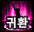
<style>
.page{position:relative;width:34px;height:32px}
.page>*{position:absolute;margin:0}
.t1{font:11px "MalgunGothicBold";color:#ffffff}
</style>
<div class="page">
<p class="t1" style="left:6px;top:17px;width:22px;height:11px">귀환</p>
</div>
